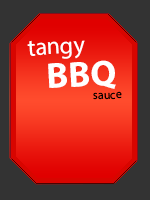
<style>
.page{position:relative;width:150px;height:200px;background:#333333}
.page>*{position:absolute;margin:0}
.t1{font:24px "MyriadPro-Regular";color:#ffffff}
.t2{font:36px "MyriadPro-Bold";color:#ffffff}
.t3{font:12px "MyriadPro-Regular";color:#000000}
</style>
<div class="page">
<p class="t1" style="left:27px;top:40px;width:58px;height:19px;rotate:-3deg">tangy</p>
<p class="t2" style="left:48px;top:60px;width:68px;height:29px;rotate:-3deg">BBQ</p>
<p class="t3" style="left:93px;top:91px;width:29px;height:9px;rotate:-3deg">sauce</p>
</div>
